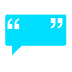
<style>
.page{position:relative;width:72px;height:72px;background:#ffffff}
.page>*{position:absolute;margin:0}
.t1{font:30px "HYgtrE";color:#ffffff}
</style>
<div class="page">
<p class="t1" style="left:7px;top:18px;width:13px;height:11px">“</p>
<p class="t1" style="left:50px;top:18px;width:13px;height:11px">”</p>
</div>
